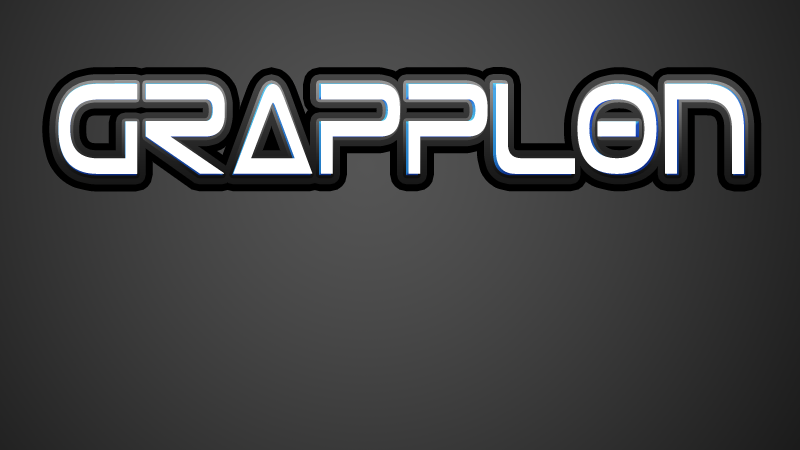
<style>
.page{position:relative;width:800px;height:450px}
.page>*{position:absolute;margin:0}
.t1{font:132.4px "Tele-Marines";letter-spacing:-0.02em;color:#ffffff;font-weight:bold;scale:0.75 1}
</style>
<div class="page">
<p class="t1" style="left:58px;top:83px;width:686px;height:91px">GrapplOn</p>
</div>
